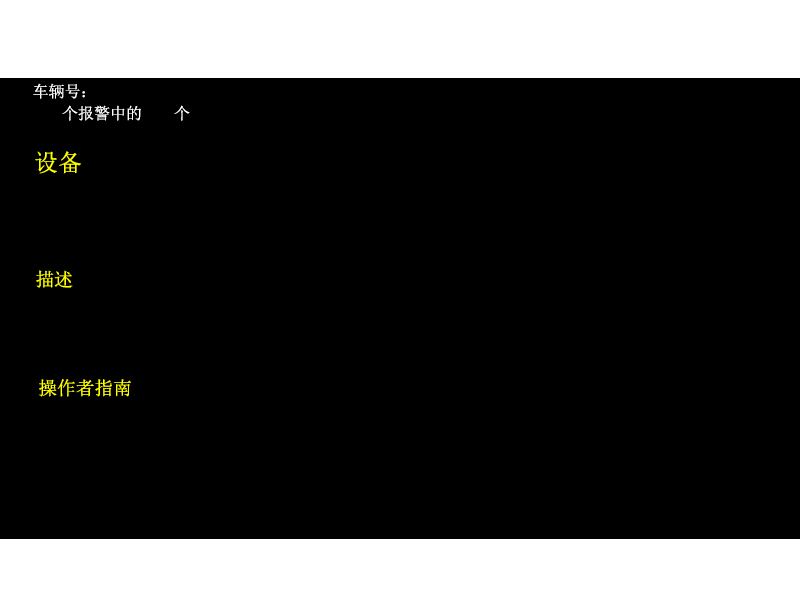
<style>
.page{position:relative;width:800px;height:600px;background:#000000}
.page>*{position:absolute;margin:0}
.t1{font:12px "SimSun";color:#ffffff}
.t2{font:16px "SimSun";color:#ffffff}
.t3{font:24px "SimSun";color:#ffff00}
.t4{font:18.7px "SimSun";color:#ffff00}
</style>
<div class="page">
<p class="t1" style="left:33px;top:83px;width:52px;height:16px">车辆号：</p>
<p class="t2" style="left:62px;top:105px;width:128px;height:16px">个报警中的    个</p>
<p class="t3" style="left:35px;top:151px;width:46px;height:23px">设备</p>
<p class="t4" style="left:36px;top:270px;width:37px;height:18px">描述</p>
<p class="t4" style="left:39px;top:379px;width:92px;height:18px">操作者指南</p>
</div>
